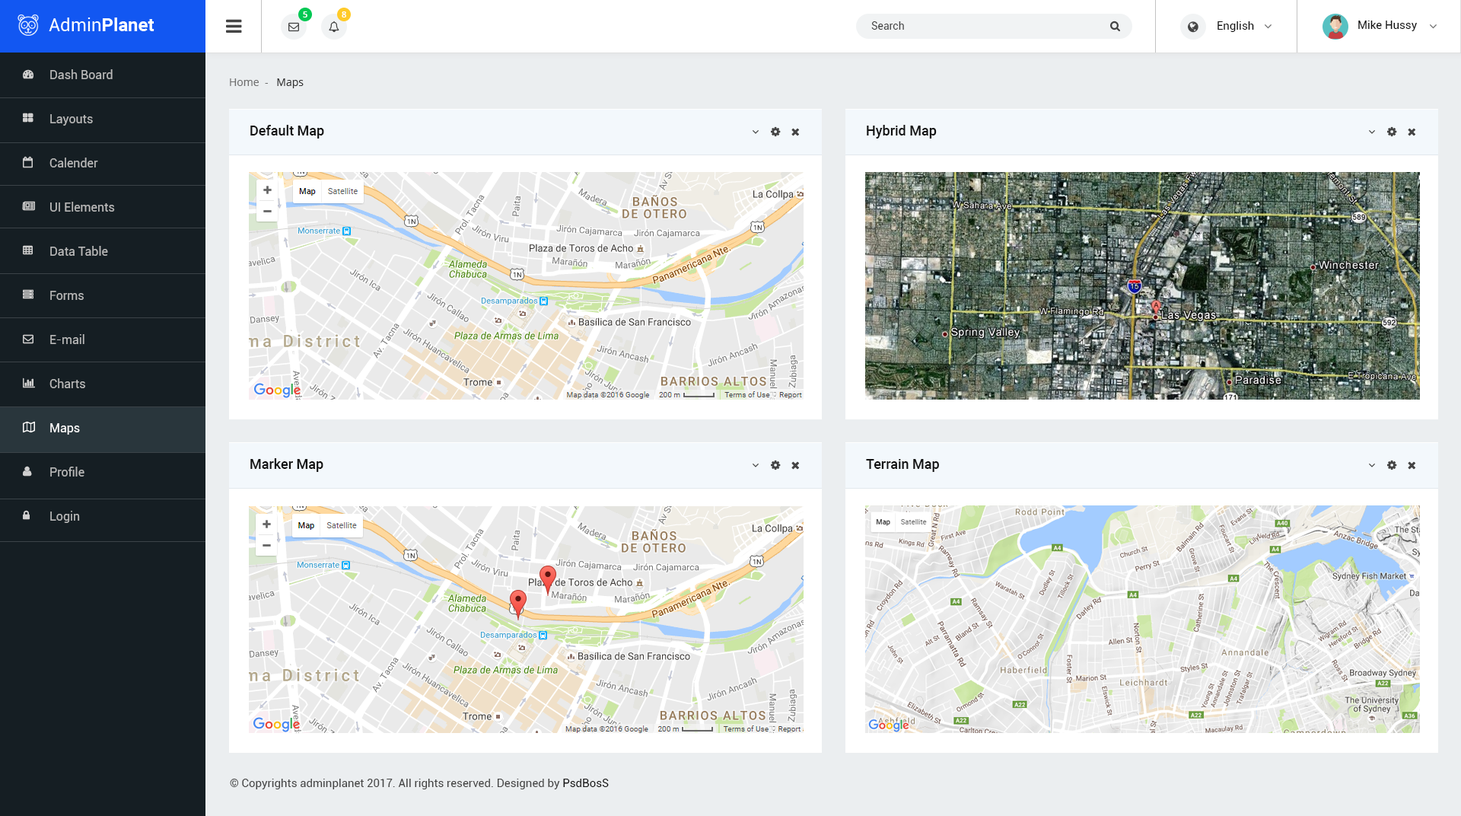
<style>
.page{position:relative;width:1461px;height:816px}
.page>*{position:absolute;margin:0}
.t1{font:8.4px "OpenSans-Semibold";color:#ffffff}
.t2{font:10.7px "Roboto-Regular";color:#444444}
.t3{font:11.4px "Roboto-Regular";color:#111111}
.t4{font:12.2px/44.1px "Roboto-Regular";color:#b9b9b9}
.t5{font:12.2px/44.1px "Roboto-Regular";color:#ffffff}
.t6{font:10.7px "OpenSans";color:#707070}
.t7{font:10.7px "OpenSans";color:#333333}
.t8{font:13.7px "Roboto-Medium";color:#111111}
.t9{font:11.4px "Roboto-Regular";color:#444444}
</style>
<div class="page">
<p class="t1" style="left:303px;top:11px;width:5px;height:7px">5</p>
<p class="t1" style="left:342px;top:11px;width:4px;height:7px">8</p>
<p class="t2" style="left:872px;top:21px;width:32px;height:9px">Search</p>
<p class="t3" style="left:1218px;top:21px;width:36px;height:11px">English</p>
<p class="t3" style="left:1359px;top:21px;width:58px;height:10px">Mike Hussy</p>
<p class="t4" style="left:49px;top:69px;width:66px;height:454px">Dash Board<br>Layouts<br>Calender<br>UI Elements<br>Data Table<br>Forms<br>E-mail<br>Charts<br><span class="t5">Maps<br></span>Profile<br>Login</p>
<p class="t6" style="left:230px;top:78px;width:74px;height:10px">Home  -  <span class="t7"> Maps</span></p>
<p class="t8" style="left:250px;top:125px;width:74px;height:14px">Default Map</p>
<p class="t8" style="left:867px;top:125px;width:70px;height:14px">Hybrid Map</p>
<p class="t8" style="left:250px;top:458px;width:73px;height:14px">Marker Map</p>
<p class="t8" style="left:866px;top:459px;width:73px;height:13px">Terrain Map</p>
<p class="t9" style="left:230px;top:779px;width:379px;height:10px">© Copyrights adminplanet 2017. All rights reserved. Designed by <span class="t3">PsdBosS</span></p>
</div>
